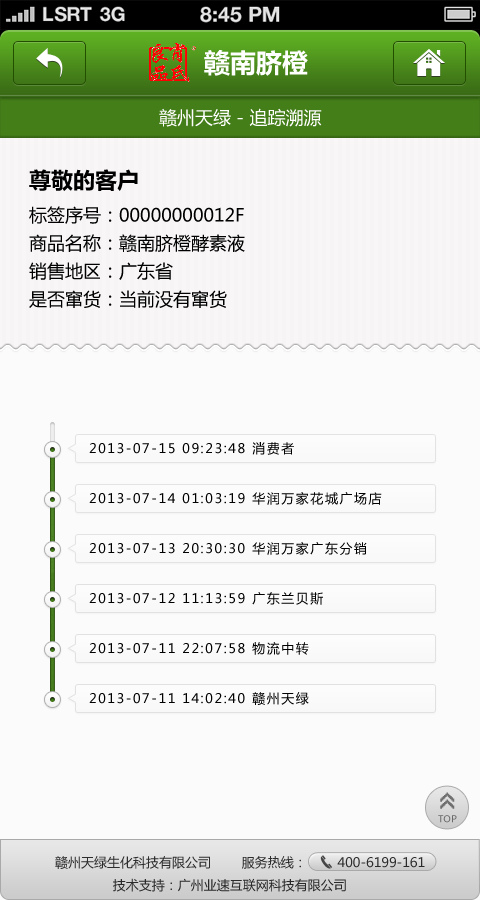
<style>
.page{position:relative;width:480px;height:900px;background:#fbfbfb}
.page>*{position:absolute;margin:0}
.t1{font:26px "MicrosoftYaHeiBold";color:#ffffff}
.t2{font:18px "MicrosoftYaHei";color:#ffffff}
.t3{font:18px/28px "MicrosoftYaHei";color:#000000}
.t4{font:22px/37px "MicrosoftYaHeiBold";color:#000000}
.t5{font:13px "MicrosoftYaHei";letter-spacing:0.12em;color:#000000}
.t6{font:26px "8514oem";letter-spacing:-0.2em;color:#6f6f6f;font-weight:bold}
.t7{font:9.3px "MicrosoftYaHei";color:#686868}
.t8{font:13px "MicrosoftYaHei";color:#2c2c2c}
</style>
<div class="page">
<p class="t1" style="left:204px;top:50px;width:104px;height:26px">赣南脐橙</p>
<p class="t2" style="left:159px;top:108px;width:163px;height:19px">赣州天绿 - 追踪溯源</p>
<p class="t3" style="left:29px;top:169px;width:216px;height:139px"><span class="t4">尊敬的客户<br></span>标签序号：00000000012F<br>商品名称：赣南脐橙酵素液<br>销售地区：广东省<br>是否窜货：当前没有窜货</p>
<p class="t5" style="left:89px;top:442px;width:205px;height:13px">2013-07-15 09:23:48 消费者</p>
<p class="t5" style="left:89px;top:492px;width:293px;height:13px">2013-07-14 01:03:19 华润万家花城广场店</p>
<p class="t5" style="left:89px;top:542px;width:278px;height:13px">2013-07-13 20:30:30 华润万家广东分销</p>
<p class="t5" style="left:89px;top:592px;width:234px;height:13px">2013-07-12 11:13:59 广东兰贝斯</p>
<p class="t5" style="left:89px;top:642px;width:220px;height:13px">2013-07-11 22:07:58 物流中转</p>
<p class="t5" style="left:89px;top:692px;width:220px;height:13px">2013-07-11 14:02:40 赣州天绿</p>
<p class="t6" style="left:440px;top:792px;width:15px;height:17px;rotate:-90deg">&gt;&gt;</p>
<p class="t7" style="left:438px;top:815px;width:19px;height:8px">TOP</p>
<p class="t8" style="left:55px;top:856px;width:370px;height:36px">赣州天绿生化科技有限公司        服务热线：        400-6199-161<br>               技术支持：广州业速互联网科技有限公司</p>
</div>
